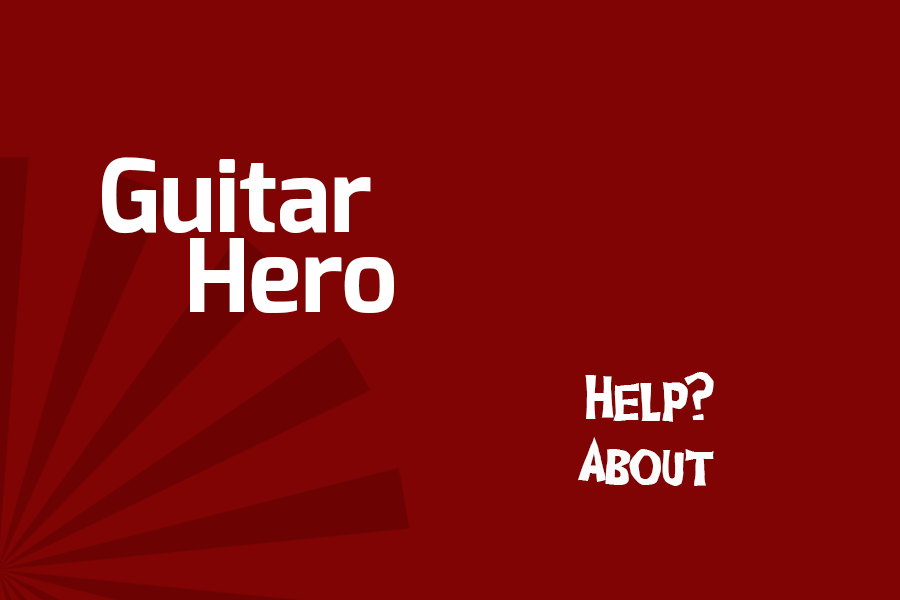
<style>
.page{position:relative;width:900px;height:600px;background:#800404}
.page>*{position:absolute;margin:0}
.t1{font:101px "Exo-Bold";color:#fefefe}
.t2{font:101px "Exo-Bold";color:#ffffff}
.t3{font:70px "GhoulishFrightAOE";color:#fdfdfd}
.t4{font:64px "GhoulishFrightAOE";color:#fbfbfb}
</style>
<div class="page">
<p class="t1" style="left:102px;top:157px;width:269px;height:77px">Guitar</p>
<p class="t2" style="left:190px;top:238px;width:204px;height:75px">Hero</p>
<p class="t3" style="left:585px;top:372px;width:129px;height:50px">Help?</p>
<p class="t4" style="left:578px;top:437px;width:136px;height:49px">About</p>
</div>
